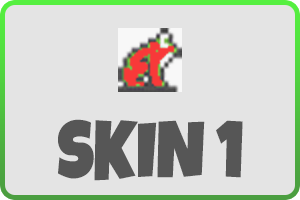
<style>
.page{position:relative;width:300px;height:200px;background:#e4e4e4}
.page>*{position:absolute;margin:0}
.t1{font:80.5px "LuckiestGuy-Regular";letter-spacing:-0.01em;color:#565656;text-transform:uppercase;scale:0.87 1}
</style>
<div class="page">
<p class="t1" style="left:58px;top:119px;width:185px;height:62px">skin 1</p>
</div>
